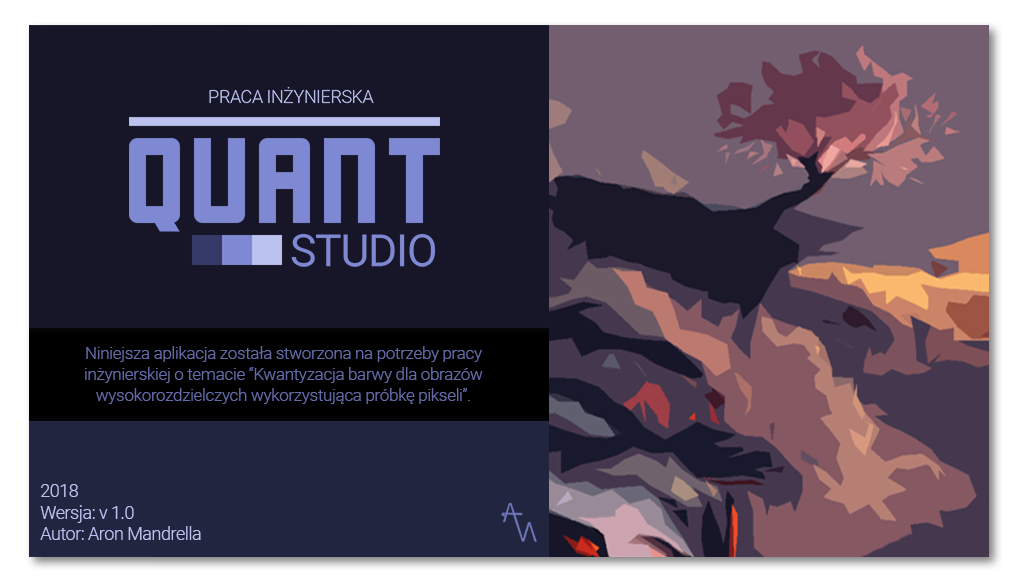
<style>
.page{position:relative;width:1020px;height:582px;background:#171628}
.page>*{position:absolute;margin:0}
.t1{font:17.3px "Roboto-Light";letter-spacing:-0.025em;color:#646ba7}
.t2{font:18px "Roboto-Light";letter-spacing:-0.025em;color:#bcc2f0}
</style>
<div class="page">
<p class="t1" style="left:85px;top:346px;width:398px;height:58px;text-align:center">Niniejsza aplikacja została stworzona na potrzeby pracy inżynierskiej o temacie “Kwantyzacja barwy dla obrazów wysokorozdzielczych wykorzystująca próbkę pikseli”.</p>
<p class="t2" style="left:40px;top:484px;width:161px;height:56px">2018<br>Wersja: v 1.0<br>Autor: Aron Mandrella</p>
</div>
